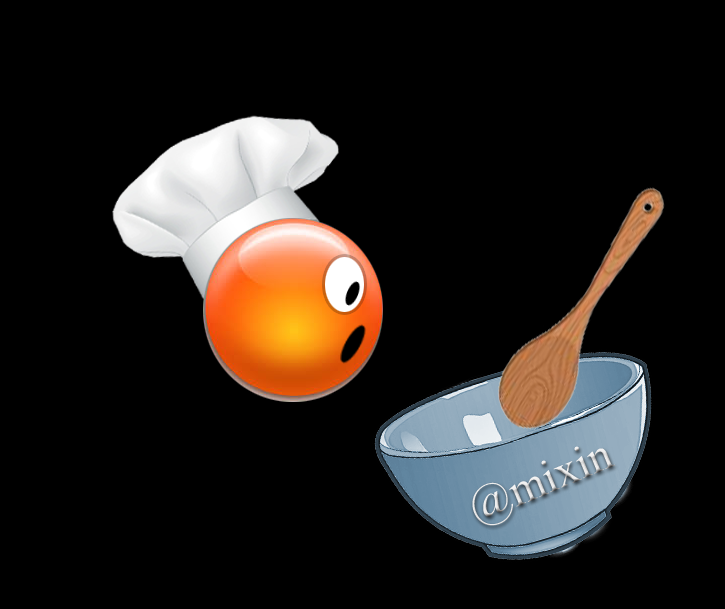
<style>
.page{position:relative;width:725px;height:609px;background:#000000}
.page>*{position:absolute;margin:0}
.t1{font:46.3px "TimesNewRomanPSMT";color:#ebebeb}
</style>
<div class="page">
<p class="t1" style="left:472px;top:446px;width:144px;height:80px;rotate:-22deg">@mixin</p>
</div>
